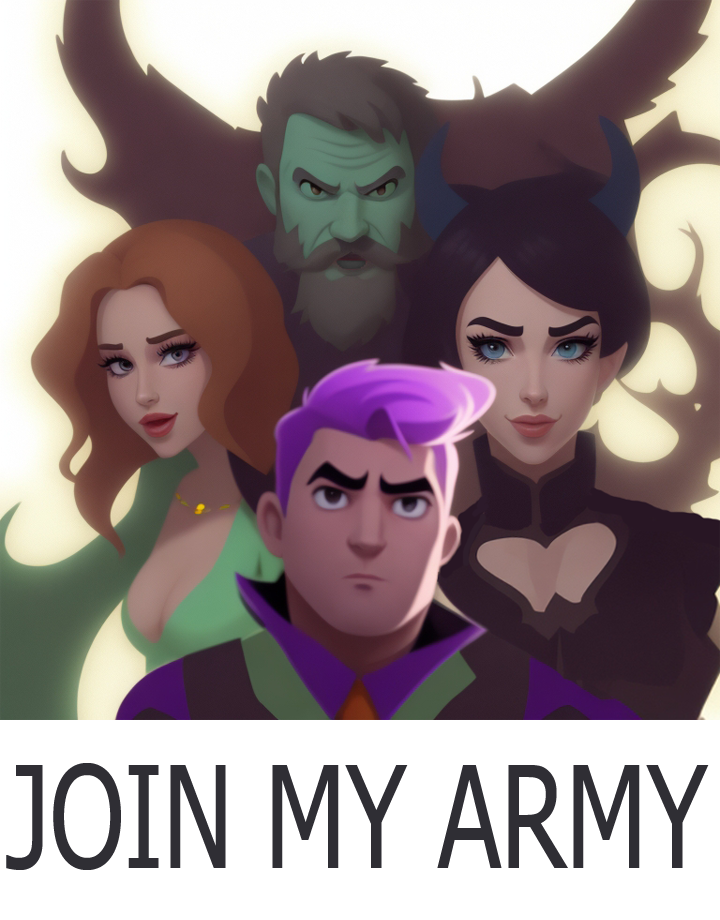
<style>
.page{position:relative;width:720px;height:920px}
.page>*{position:absolute;margin:0}
.t1{font:140.5px "Tahoma";color:#2f2e34;scale:0.74 1}
</style>
<div class="page">
<p class="t1" style="left:6px;top:763px;width:703px;height:107px">JOIN MY ARMY</p>
</div>
